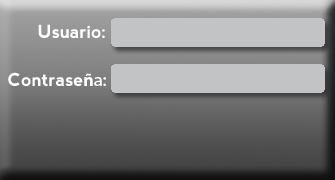
<style>
.page{position:relative;width:335px;height:180px;background:#c1c3c4}
.page>*{position:absolute;margin:0}
.t1{font:18px "nevis-Bold";color:#ffffff}
.t2{font:18px "MyriadPro-Bold";color:#ffffff}
.t3{font:18px "MyriadPro-Regular";color:#ffffff}
</style>
<div class="page">
<p class="t1" style="left:38px;top:24px;width:67px;height:14px">Usuario:</p>
<p class="t1" style="left:8px;top:72px;width:98px;height:14px">Contrase<span class="t2">ñ</span><span class="t3">a</span>:</p>
</div>
